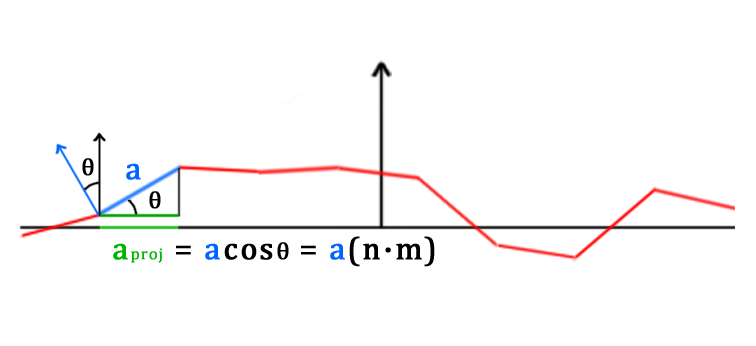
<style>
.page{position:relative;width:756px;height:346px;background:#ffffff}
.page>*{position:absolute;margin:0}
.t1{font:24px "Cambria";letter-spacing:0.06em;color:#000000;font-weight:bold}
.t2{font:32px "Cambria";letter-spacing:0.06em;color:#0064ff;font-weight:bold}
.t3{font:32px "Cambria";letter-spacing:0.06em;color:#000000;font-weight:bold}
.t4{font:32px "Cambria";letter-spacing:0.06em;color:#00b400;font-weight:bold}
.t5{font:16px "Cambria";letter-spacing:0.06em;color:#00b400;font-weight:bold}
</style>
<div class="page">
<p class="t1" style="left:82px;top:158px;width:12px;height:18px">θ</p>
<p class="t2" style="left:126px;top:163px;width:15px;height:17px">a</p>
<p class="t1" style="left:149px;top:191px;width:12px;height:18px">θ</p>
<p class="t3" style="left:113px;top:236px;width:322px;height:31px"><span class="t4">a</span><span class="t5">proj </span>= <span class="t2">a</span>cos<span class="t1">θ </span>= <span class="t2">a</span>(n·m)</p>
</div>
